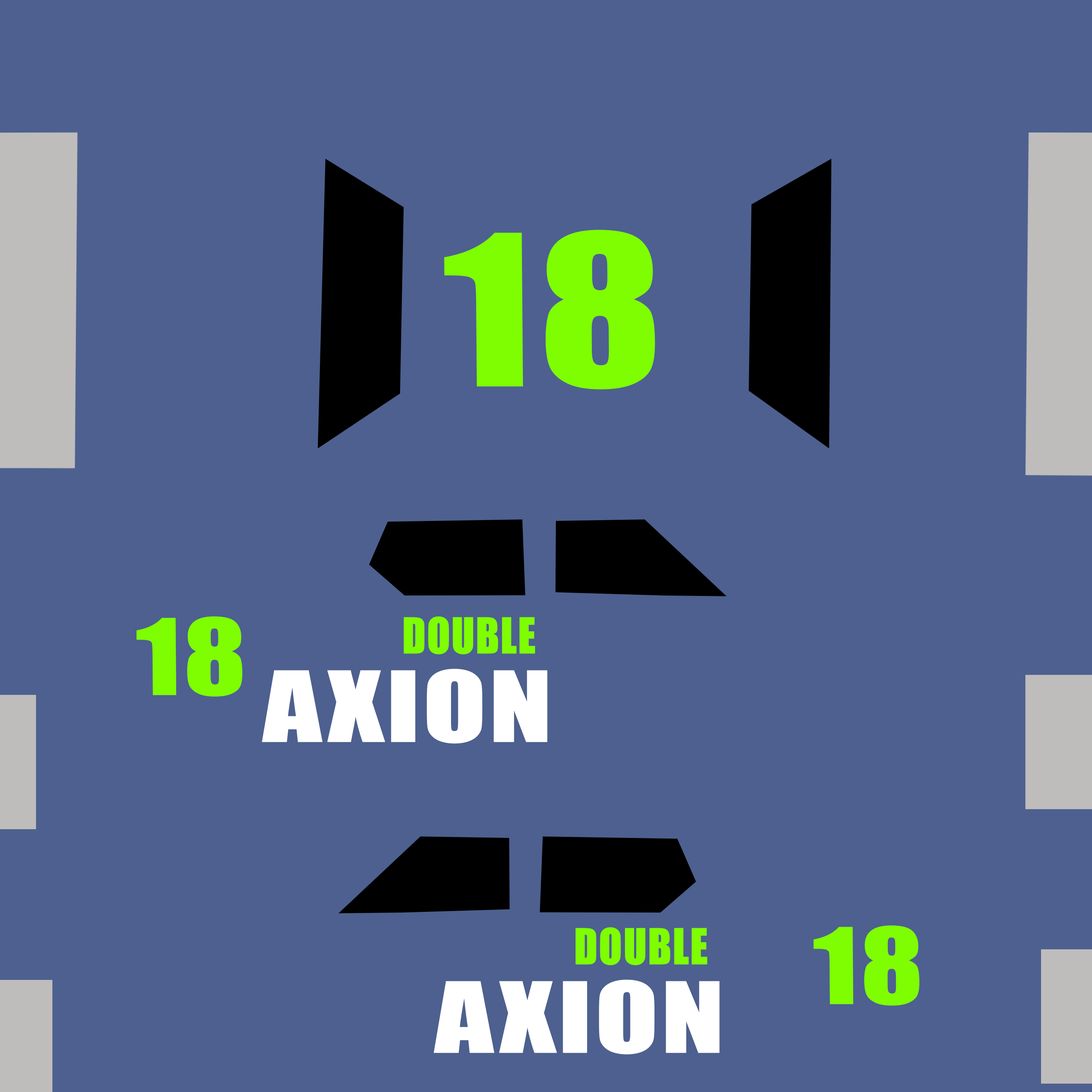
<style>
.page{position:relative;width:1092px;height:1092px;background:#4d608f}
.page>*{position:absolute;margin:0}
.t1{font:193.6px "Impact";color:#7efe00;font-weight:bold;scale:1.2 1}
.t2{font:97.3px "Impact";color:#7efe00;font-weight:bold;scale:1.2 1}
.t3{font:45.7px "Impact";color:#7efe00;font-weight:bold;scale:0.94 1}
.t4{font:90.3px "Impact";color:#ffffff;font-weight:bold;scale:1.28 1}
.t5{font:45.6px "Impact";color:#7efe00;font-weight:bold;scale:0.94 1}
.t6{font:90.2px "Impact";color:#ffffff;font-weight:bold;scale:1.28 1}
</style>
<div class="page">
<p class="t1" style="left:444px;top:230px;width:211px;height:159px">18</p>
<p class="t2" style="left:136px;top:616px;width:106px;height:81px">18</p>
<p class="t3" style="left:404px;top:616px;width:131px;height:38px">DOUBLE</p>
<p class="t4" style="left:262px;top:669px;width:285px;height:75px">AXION</p>
<p class="t5" style="left:575px;top:927px;width:132px;height:38px">DOUBLE</p>
<p class="t2" style="left:813px;top:925px;width:106px;height:81px">18</p>
<p class="t6" style="left:434px;top:980px;width:286px;height:74px">AXION</p>
</div>
